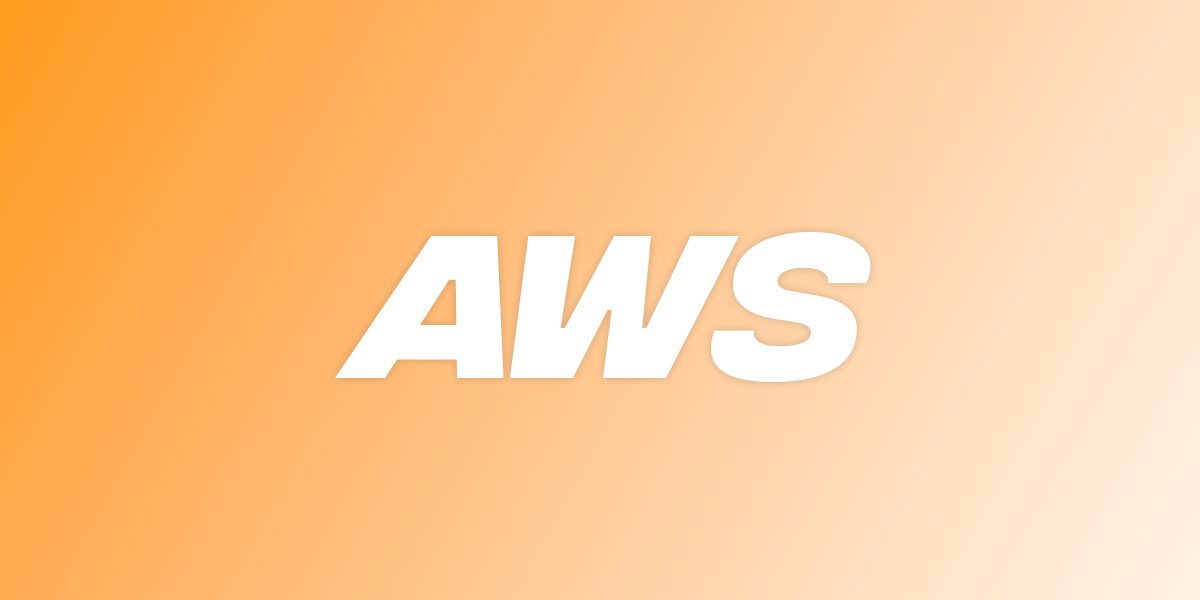
<style>
.page{position:relative;width:1200px;height:600px}
.page>*{position:absolute;margin:0}
.t1{font:202.3px "IntegralCF-BoldOblique";color:#ffffff}
</style>
<div class="page">
<p class="t1" style="left:335px;top:232px;width:536px;height:150px">AWS</p>
</div>
